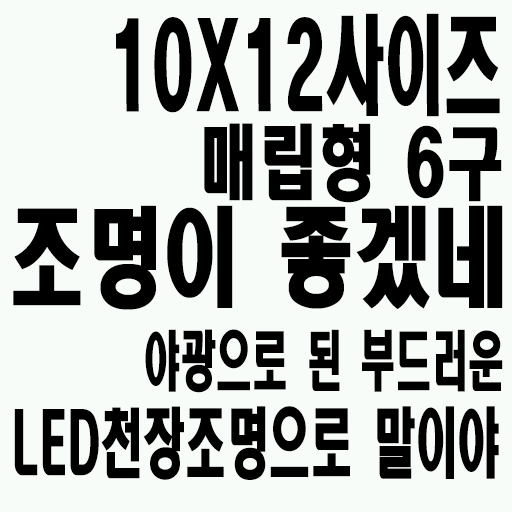
<style>
.page{position:relative;width:512px;height:512px;background:#f8fcf8}
.page>*{position:absolute;margin:0}
.t1{font:106.2px "HeadlineR-HM";color:#000000;scale:0.56 1}
.t2{font:81px "HeadlineR-HM";color:#000000;scale:0.72 1}
.t3{font:106.2px "HeadlineR-HM";color:#000000;scale:0.72 1}
.t4{font:64.8px "HeadlineR-HM";color:#000000;scale:0.56 1}
.t5{font:75.6px "HeadlineR-HM";color:#000000;scale:0.56 1}
</style>
<div class="page">
<p class="t1" style="left:116px;top:13px;width:384px;height:104px">10X12사이즈</p>
<p class="t2" style="left:204px;top:123px;width:298px;height:80px">매립형 6구</p>
<p class="t3" style="left:13px;top:205px;width:490px;height:105px">조명이 좋겠네</p>
<p class="t4" style="left:145px;top:329px;width:358px;height:64px">야광으로 된 부드러운</p>
<p class="t5" style="left:14px;top:406px;width:485px;height:74px">LED천장조명으로 말이야</p>
</div>
